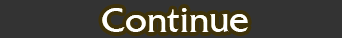
<style>
.page{position:relative;width:342px;height:38px;background:#333333}
.page>*{position:absolute;margin:0}
.t1{font:35.6px "FrizQuadrataITCbyBT-Roman";color:#fefefe}
</style>
<div class="page">
<p class="t1" style="left:102px;top:8px;width:146px;height:24px">Continue</p>
</div>
